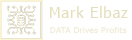
<style>
.page{position:relative;width:132px;height:40px;background:#ffffff}
.page>*{position:absolute;margin:0}
.t1{font:11.1px "Tahoma";letter-spacing:0.05em;color:#e4debb}
.t2{font:8px "Tahoma";letter-spacing:0.05em}
</style>
<div class="page">
<p class="t1" style="left:50px;top:6px;width:78px;height:12px">Mark Elbaz</p>
<p class="t2" style="left:50px;top:26px;width:77px;height:8px">DATA Drives Profits</p>
</div>
